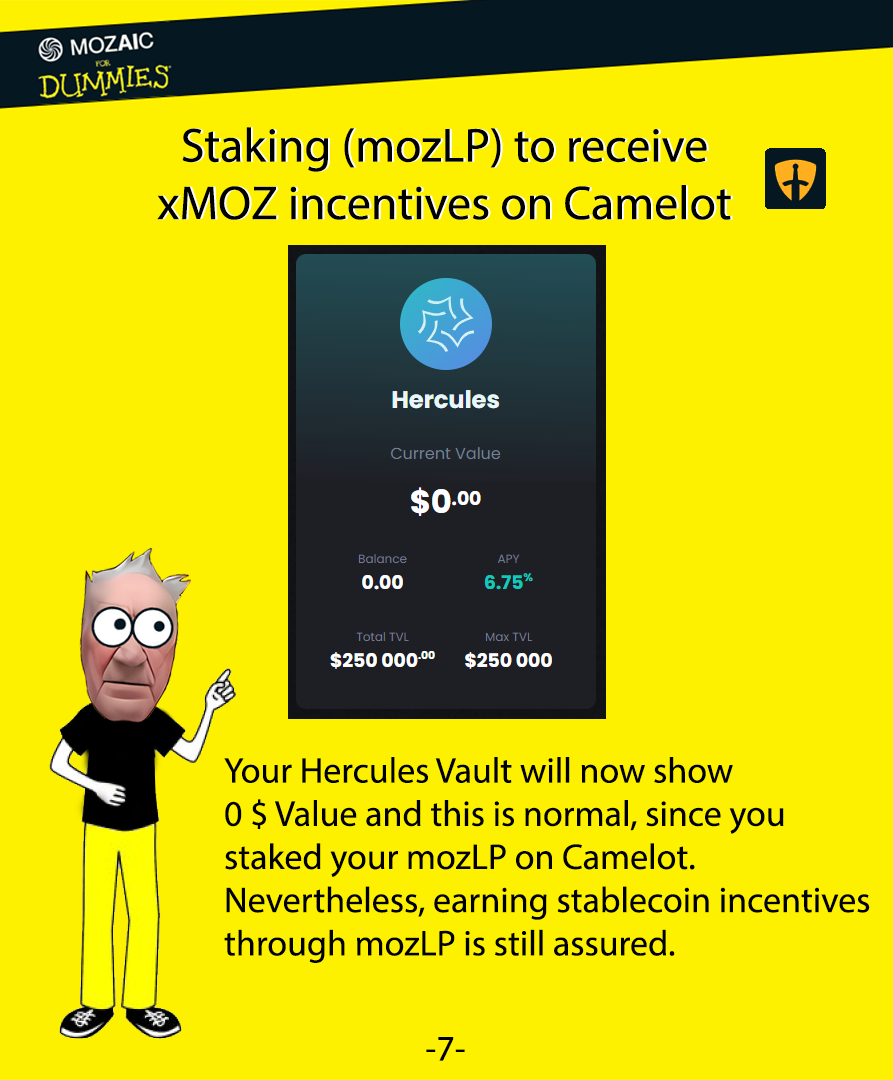
<style>
.page{position:relative;width:893px;height:1080px;background:#fdf100}
.page>*{position:absolute;margin:0}
.t1{font:48px "MyriadPro-Regular";color:#000000}
.t2{font:48px "MyriadPro-Regular"}
.t3{font:36px "MyriadPro-Regular";color:#000000}
</style>
<div class="page">
<p class="t1" style="left:157px;top:127px;width:574px;height:93px;text-align:center">Staking (mozLP) to receive <br>xMOZ incentives on Camelot</p>
<p class="t2" style="left:159px;top:127px;width:574px;height:93px;text-align:center">Staking (mozLP) to receive <br>xMOZ incentives on Camelot</p>
<p class="t3" style="left:224px;top:757px;width:646px;height:206px">Your Hercules Vault will now show <br>0 $ Value and this is normal, since you <br>staked your mozLP on Camelot.<br>Nevertheless, earning stablecoin incentives through mozLP is still assured.</p>
<p class="t3" style="left:426px;top:1037px;width:39px;height:24px">-7-</p>
</div>
